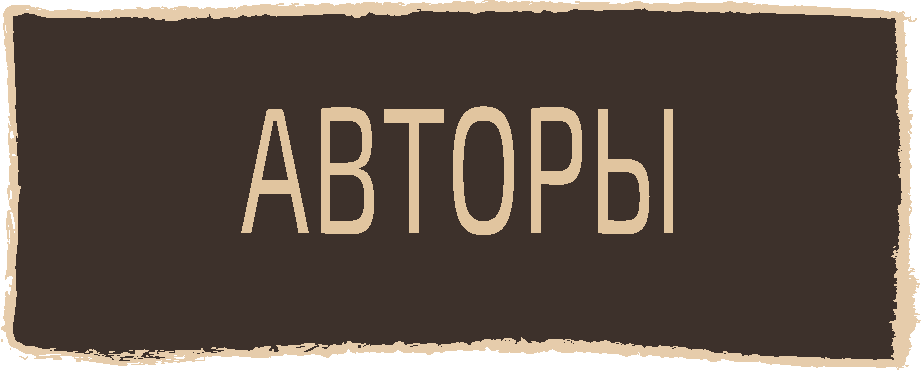
<style>
.page{position:relative;width:921px;height:370px;background:#3d312b}
.page>*{position:absolute;margin:0}
.t1{font:180.2px "Exo2-Regular";color:#e2c59f;text-transform:uppercase;scale:0.62 1}
</style>
<div class="page">
<p class="t1" style="left:241px;top:106px;width:432px;height:129px">Авторы</p>
</div>
